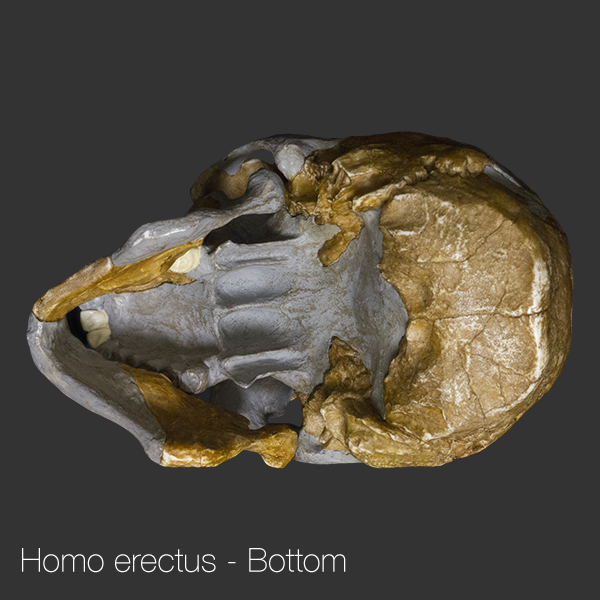
<style>
.page{position:relative;width:600px;height:600px;background:#333333}
.page>*{position:absolute;margin:0}
.t1{font:33.3px "HelveticaNeue-Thin";color:#ffffff}
</style>
<div class="page">
<p class="t1" style="left:22px;top:548px;width:324px;height:25px">Homo erectus - Bottom</p>
</div>
